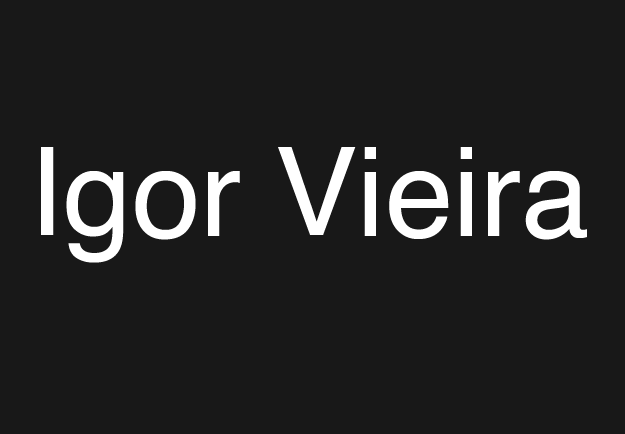
<style>
.page{position:relative;width:625px;height:434px;background:#181818}
.page>*{position:absolute;margin:0}
.t1{font:123.1px "Helvetica";color:#ffffff}
</style>
<div class="page">
<p class="t1" style="left:41px;top:147px;width:546px;height:116px">Igor Vieira</p>
</div>
